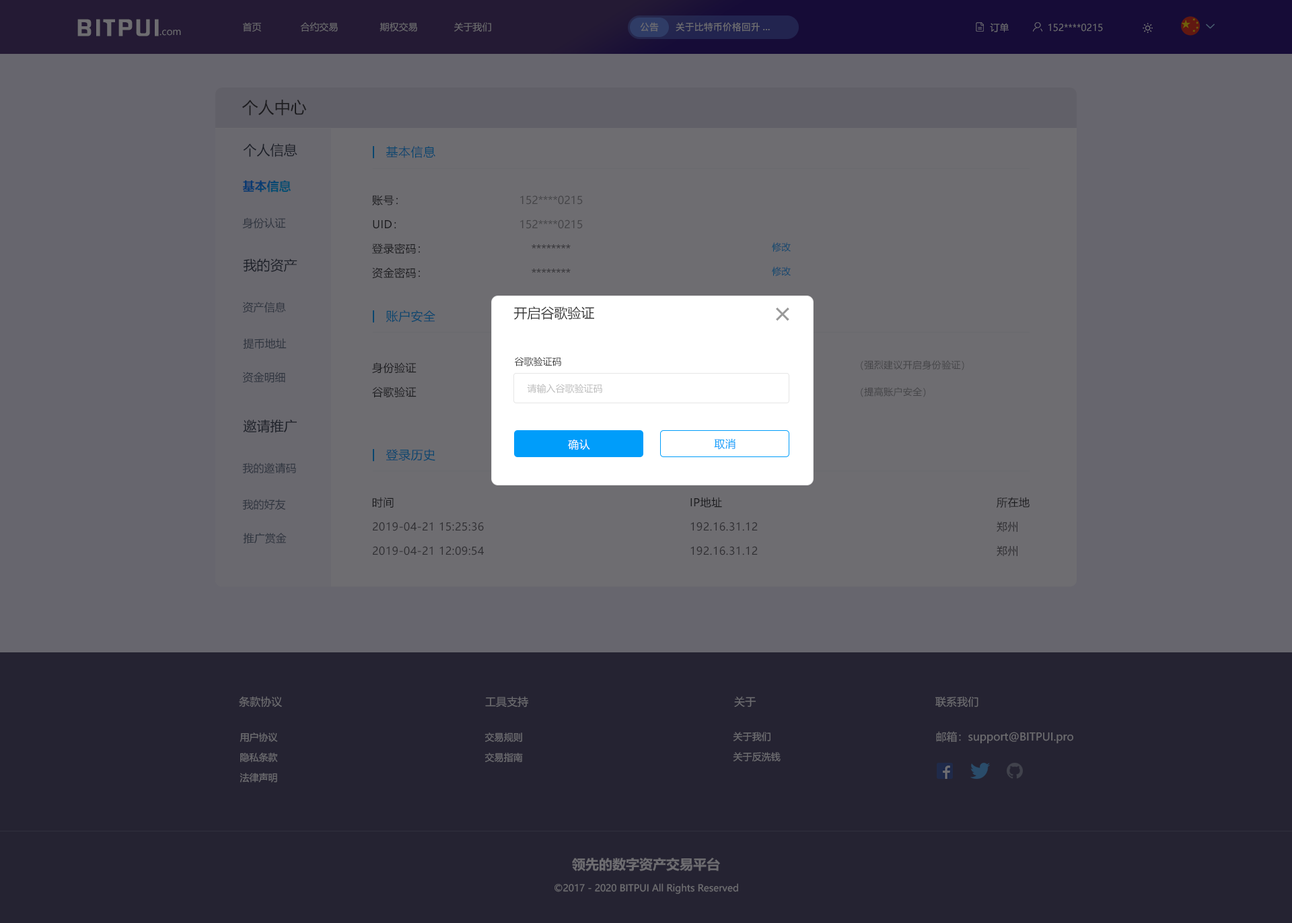
<style>
.page{position:relative;width:1292px;height:923px;background:#67666e}
.page>*{position:absolute;margin:0}
.t1{font:20.6px "FZHZGBJW--GB1-0";letter-spacing:0.1em;color:#6e6d71;scale:1.14 1}
.t2{font:9.4px "MicrosoftYaHei";color:#6e6d71}
.t3{font:9.4px "PingFang-SC-Bold";color:#6e6d71}
.t4{font:16.2px "MicrosoftYaHei";color:#333333}
.t5{font:13.5px "MicrosoftYaHei";color:#1b1f27}
.t6{font:12.1px "MicrosoftYaHei";letter-spacing:0.03em;color:#08466f}
.t7{font:12.1px "MicrosoftYaHei-Bold";color:#084571}
.t8{font:10.8px/24.2px "MicrosoftYaHei";letter-spacing:0.03em;color:#333333}
.t9{font:10.8px/24.2px "MicrosoftYaHei";color:#454448}
.t10{font:10.8px "MicrosoftYaHei";color:#2f353f}
.t11{font:9.4px/24.2px "MicrosoftYaHei";color:#08466f}
.t12{font:13.5px "MicrosoftYaHei";color:#333333}
.t13{font:28.7px "MicrosoftYaHei";letter-spacing:0.03em;color:#999999}
.t14{font:9.4px "MicrosoftYaHei";color:#333333}
.t15{font:9.4px/26.9px "MicrosoftYaHei";letter-spacing:0.025em;color:#454448}
.t16{font:9.4px "MicrosoftYaHei";color:#bbbbbb}
.t17{font:10.8px "MicrosoftYaHei";letter-spacing:0.03em;color:#ffffff}
.t18{font:10.8px "MicrosoftYaHei";letter-spacing:0.03em;color:#009dfa}
.t19{font:10.8px/24.2px "MicrosoftYaHei";letter-spacing:0.03em;color:#666666}
.t20{font:10.8px "MicrosoftYaHei";color:#6e6d71}
.t21{font:9.4px/20.2px "MicrosoftYaHei";color:#6e6d71}
.t22{font:13.5px "MicrosoftYaHei-Bold";color:#6e6d71}
</style>
<div class="page">
<p class="t1" style="left:77px;top:19px;width:82px;height:17px">BITPUI</p>
<p class="t2" style="left:160px;top:30px;width:21px;height:6px">.com</p>
<p class="t2" style="left:243px;top:22px;width:248px;height:10px">首页              合约交易               期权交易             关于我们</p>
<p class="t3" style="left:640px;top:22px;width:19px;height:10px">公告</p>
<p class="t3" style="left:676px;top:22px;width:94px;height:10px">关于比特币价格回升...</p>
<p class="t2" style="left:990px;top:23px;width:19px;height:9px">订单</p>
<p class="t2" style="left:1049px;top:24px;width:54px;height:8px">152****0215</p>
<p class="t4" style="left:242px;top:100px;width:65px;height:16px">个人中心</p>
<p class="t5" style="left:243px;top:143px;width:54px;height:14px">个人信息</p>
<p class="t6" style="left:386px;top:146px;width:49px;height:12px">基本信息</p>
<p class="t7" style="left:242px;top:180px;width:49px;height:12px">基本信息</p>
<p class="t8" style="left:372px;top:195px;width:48px;height:84px">账号：<br>UID：<br>登录密码：<br>资金密码：</p>
<p class="t9" style="left:520px;top:195px;width:63px;height:78px;text-align:center">152****0215<br>152****0215<br>********<br>********</p>
<p class="t10" style="left:242px;top:217px;width:44px;height:12px">身份认证</p>
<p class="t11" style="left:772px;top:242px;width:19px;height:34px;text-align:center">修改<br>修改</p>
<p class="t5" style="left:243px;top:258px;width:54px;height:14px">我的资产</p>
<p class="t10" style="left:242px;top:302px;width:44px;height:11px">资产信息</p>
<p class="t6" style="left:386px;top:310px;width:49px;height:12px">账户安全</p>
<p class="t12" style="left:514px;top:306px;width:80px;height:14px">开启谷歌验证</p>
<p class="t13" style="left:776px;top:307px;width:13px;height:14px">×</p>
<p class="t10" style="left:243px;top:338px;width:44px;height:11px">提币地址</p>
<p class="t8" style="left:372px;top:362px;width:45px;height:36px">身份验证<br>谷歌验证</p>
<p class="t14" style="left:514px;top:357px;width:47px;height:9px">谷歌验证码</p>
<p class="t15" style="left:861px;top:360px;width:103px;height:37px">（强烈建议开启身份验证）<br>（提高账户安全）</p>
<p class="t10" style="left:242px;top:372px;width:43px;height:11px">资金明细</p>
<p class="t16" style="left:527px;top:384px;width:75px;height:9px">请输入谷歌验证码</p>
<p class="t5" style="left:243px;top:419px;width:54px;height:14px">邀请推广</p>
<p class="t6" style="left:386px;top:449px;width:49px;height:12px">登录历史</p>
<p class="t17" style="left:568px;top:439px;width:22px;height:11px">确认</p>
<p class="t18" style="left:714px;top:438px;width:22px;height:12px">取消</p>
<p class="t10" style="left:242px;top:462px;width:54px;height:11px">我的邀请码</p>
<p class="t19" style="left:372px;top:497px;width:112px;height:58px"><span class="t8">时间<br></span>2019-04-21 15:25:36<br>2019-04-21 12:09:54</p>
<p class="t19" style="left:691px;top:497px;width:67px;height:58px"><span class="t8">IP地址<br></span>192.16.31.12<br>192.16.31.12</p>
<p class="t19" style="left:997px;top:497px;width:33px;height:59px"><span class="t8">所在地<br></span>郑州<br>郑州</p>
<p class="t10" style="left:242px;top:499px;width:44px;height:11px">我的好友</p>
<p class="t10" style="left:243px;top:532px;width:44px;height:12px">推广赏金</p>
<p class="t20" style="left:239px;top:696px;width:43px;height:11px">条款协议</p>
<p class="t20" style="left:485px;top:696px;width:43px;height:11px">工具支持</p>
<p class="t20" style="left:734px;top:696px;width:23px;height:11px">关于</p>
<p class="t20" style="left:936px;top:696px;width:43px;height:11px">联系我们</p>
<p class="t21" style="left:240px;top:732px;width:38px;height:50px;text-align:center">用户协议<br>隐私条款<br>法律声明</p>
<p class="t21" style="left:485px;top:732px;width:38px;height:30px">交易规则<br>交易指南</p>
<p class="t21" style="left:733px;top:732px;width:48px;height:29px">关于我们<br>关于反洗钱</p>
<p class="t20" style="left:936px;top:731px;width:138px;height:13px">邮箱：support@BITPUI.pro</p>
<p class="t22" style="left:572px;top:857px;width:148px;height:14px">领先的数字资产交易平台</p>
<p class="t2" style="left:555px;top:883px;width:183px;height:11px">©2017 - 2020 BITPUI All Rights Reserved</p>
</div>
